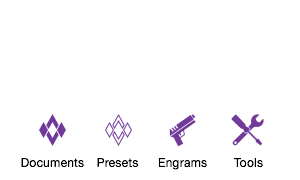
<style>
.page{position:relative;width:300px;height:180px;background:#ffffff}
.page>*{position:absolute;margin:0}
.t1{font:12px "HelveticaNeue";letter-spacing:0.02em;color:#000000}
</style>
<div class="page">
<p class="t1" style="left:21px;top:158px;width:63px;height:10px">Documents</p>
<p class="t1" style="left:97px;top:158px;width:42px;height:10px">Presets</p>
<p class="t1" style="left:158px;top:158px;width:49px;height:12px">Engrams</p>
<p class="t1" style="left:233px;top:158px;width:30px;height:10px">Tools</p>
</div>
